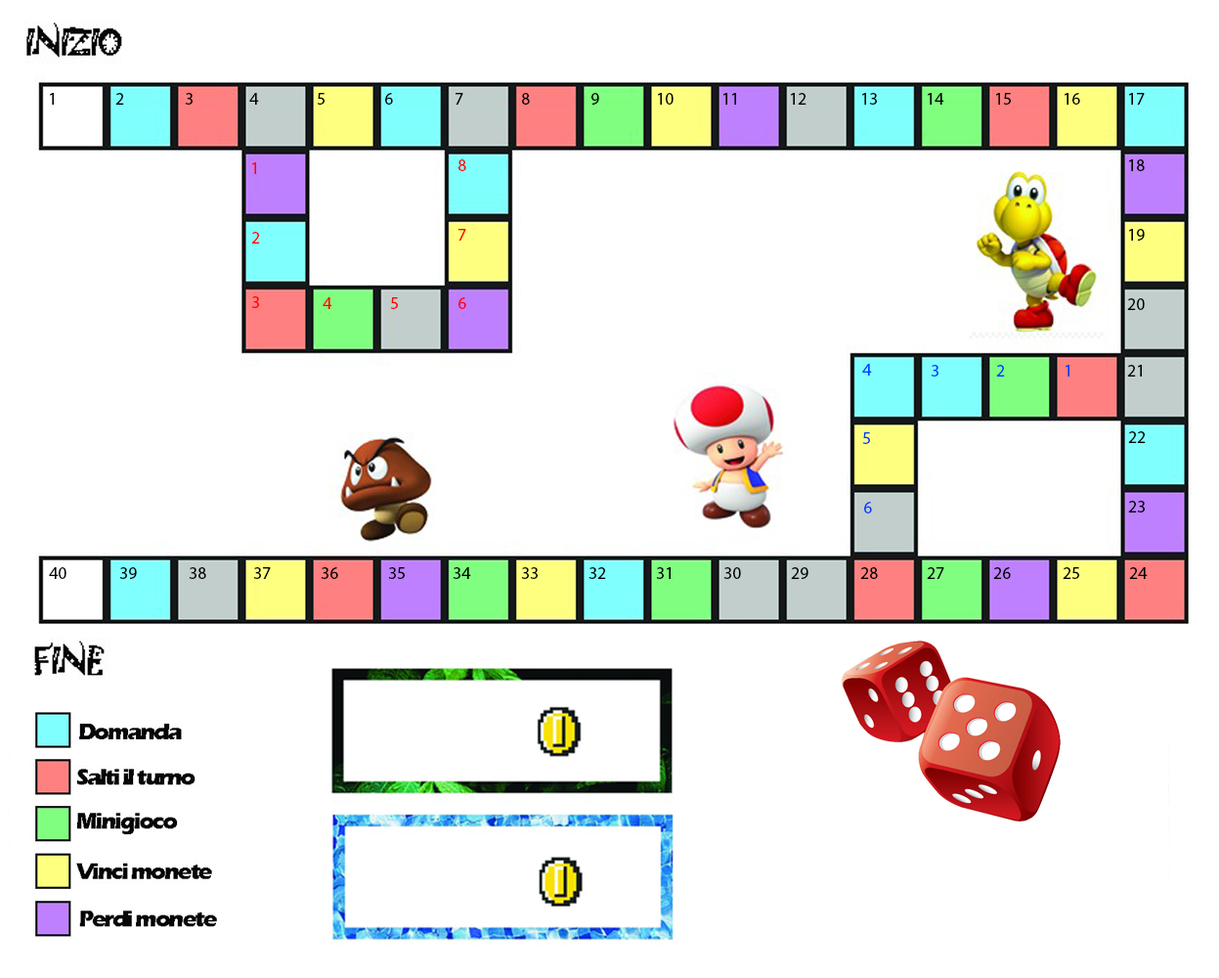
<style>
.page{position:relative;width:1219px;height:978px;background:#ffffff}
.page>*{position:absolute;margin:0}
.t1{font:17.2px "MyriadPro-Regular";color:#000000}
.t2{font:17.2px "MyriadPro-Regular";color:#ff0000}
.t3{font:17.2px "MyriadPro-Regular";color:#003cff}
</style>
<div class="page">
<p class="t1" style="left:50px;top:93px;width:4px;height:12px">1</p>
<p class="t1" style="left:115px;top:93px;width:9px;height:12px">2</p>
<p class="t1" style="left:185px;top:93px;width:8px;height:12px">3</p>
<p class="t1" style="left:249px;top:93px;width:10px;height:12px">4</p>
<p class="t1" style="left:317px;top:93px;width:8px;height:12px">5</p>
<p class="t1" style="left:385px;top:93px;width:8px;height:12px">6</p>
<p class="t1" style="left:456px;top:93px;width:8px;height:12px">7</p>
<p class="t1" style="left:522px;top:93px;width:8px;height:12px">8</p>
<p class="t1" style="left:592px;top:93px;width:7px;height:12px">9</p>
<p class="t1" style="left:658px;top:93px;width:16px;height:12px">10</p>
<p class="t1" style="left:724px;top:93px;width:12px;height:12px">11</p>
<p class="t1" style="left:791px;top:93px;width:16px;height:12px">12</p>
<p class="t1" style="left:862px;top:93px;width:15px;height:12px">13</p>
<p class="t1" style="left:928px;top:93px;width:17px;height:12px">14</p>
<p class="t1" style="left:996px;top:93px;width:15px;height:12px">15</p>
<p class="t1" style="left:1065px;top:93px;width:16px;height:12px">16</p>
<p class="t1" style="left:1129px;top:93px;width:16px;height:12px">17</p>
<p class="t2" style="left:459px;top:159px;width:7px;height:12px">8</p>
<p class="t1" style="left:1129px;top:159px;width:16px;height:12px">18</p>
<p class="t2" style="left:252px;top:162px;width:4px;height:12px">1</p>
<p class="t2" style="left:251px;top:232px;width:9px;height:11px">2</p>
<p class="t2" style="left:459px;top:229px;width:7px;height:12px">7</p>
<p class="t1" style="left:1129px;top:229px;width:16px;height:12px">19</p>
<p class="t2" style="left:251px;top:296px;width:8px;height:12px">3</p>
<p class="t2" style="left:323px;top:297px;width:9px;height:12px">4</p>
<p class="t2" style="left:390px;top:297px;width:8px;height:12px">5</p>
<p class="t2" style="left:459px;top:297px;width:7px;height:12px">6</p>
<p class="t1" style="left:1127px;top:298px;width:18px;height:12px">20</p>
<p class="t3" style="left:862px;top:364px;width:10px;height:12px">4</p>
<p class="t3" style="left:931px;top:365px;width:8px;height:11px">3</p>
<p class="t3" style="left:996px;top:365px;width:9px;height:11px">2</p>
<p class="t3" style="left:1066px;top:365px;width:4px;height:11px">1</p>
<p class="t1" style="left:1127px;top:365px;width:15px;height:11px">21</p>
<p class="t3" style="left:862px;top:432px;width:8px;height:12px">5</p>
<p class="t1" style="left:1128px;top:431px;width:18px;height:12px">22</p>
<p class="t3" style="left:864px;top:502px;width:8px;height:11px">6</p>
<p class="t1" style="left:1128px;top:501px;width:17px;height:11px">23</p>
<p class="t1" style="left:49px;top:567px;width:17px;height:12px">40</p>
<p class="t1" style="left:119px;top:567px;width:18px;height:12px">39</p>
<p class="t1" style="left:189px;top:567px;width:17px;height:12px">38</p>
<p class="t1" style="left:253px;top:567px;width:18px;height:12px">37</p>
<p class="t1" style="left:321px;top:567px;width:17px;height:12px">36</p>
<p class="t1" style="left:388px;top:567px;width:17px;height:12px">35</p>
<p class="t1" style="left:453px;top:567px;width:18px;height:12px">34</p>
<p class="t1" style="left:521px;top:567px;width:17px;height:12px">33</p>
<p class="t1" style="left:589px;top:567px;width:17px;height:12px">32</p>
<p class="t1" style="left:656px;top:567px;width:15px;height:12px">31</p>
<p class="t1" style="left:724px;top:567px;width:17px;height:12px">30</p>
<p class="t1" style="left:791px;top:567px;width:18px;height:12px">29</p>
<p class="t1" style="left:861px;top:567px;width:17px;height:12px">28</p>
<p class="t1" style="left:927px;top:567px;width:18px;height:12px">27</p>
<p class="t1" style="left:994px;top:567px;width:17px;height:12px">26</p>
<p class="t1" style="left:1063px;top:567px;width:17px;height:12px">25</p>
<p class="t1" style="left:1129px;top:567px;width:19px;height:12px">24</p>
</div>
